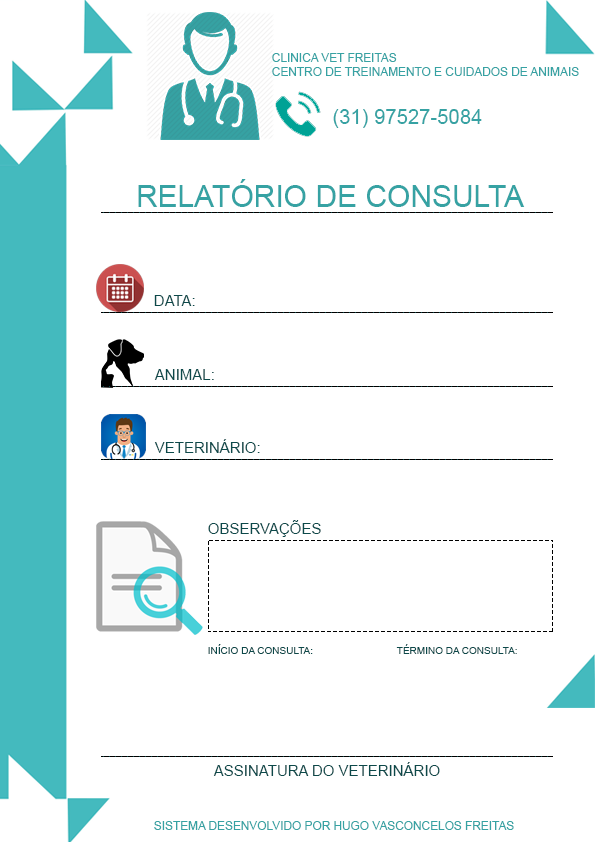
<style>
.page{position:relative;width:595px;height:842px;background:#ffffff}
.page>*{position:absolute;margin:0}
.t1{font:11.9px "ArialMT";color:#36a2a3}
.t2{font:20.3px "ArialMT";color:#36a2a3}
.t3{font:30px "ArialMT";color:#36a2a3}
.t4{font:15px "ArialMT";color:#0c494a}
.t5{font:10px "ArialMT";color:#0c494a}
</style>
<div class="page">
<p class="t1" style="left:272px;top:53px;width:307px;height:23px">CLINICA VET FREITAS<br>CENTRO DE TREINAMENTO E CUIDADOS DE ANIMAIS</p>
<p class="t2" style="left:333px;top:109px;width:149px;height:19px">(31) 97527-5084</p>
<p class="t3" style="left:138px;top:179px;width:387px;height:28px">RELATÓRIO DE CONSULTA</p>
<p class="t4" style="left:154px;top:295px;width:41px;height:11px">DATA:</p>
<p class="t4" style="left:154px;top:369px;width:60px;height:11px">ANIMAL:</p>
<p class="t4" style="left:154px;top:439px;width:106px;height:14px">VETERINÁRIO:</p>
<p class="t4" style="left:208px;top:520px;width:113px;height:17px">OBSERVAÇÕES</p>
<p class="t5" style="left:208px;top:644px;width:105px;height:10px">INÍCIO DA CONSULTA:</p>
<p class="t5" style="left:396px;top:644px;width:121px;height:10px">TÉRMINO DA CONSULTA:</p>
<p class="t4" style="left:213px;top:762px;width:227px;height:14px">ASSINATURA DO VETERINÁRIO</p>
<p class="t1" style="left:154px;top:821px;width:360px;height:9px">SISTEMA DESENVOLVIDO POR HUGO VASCONCELOS FREITAS</p>
</div>
